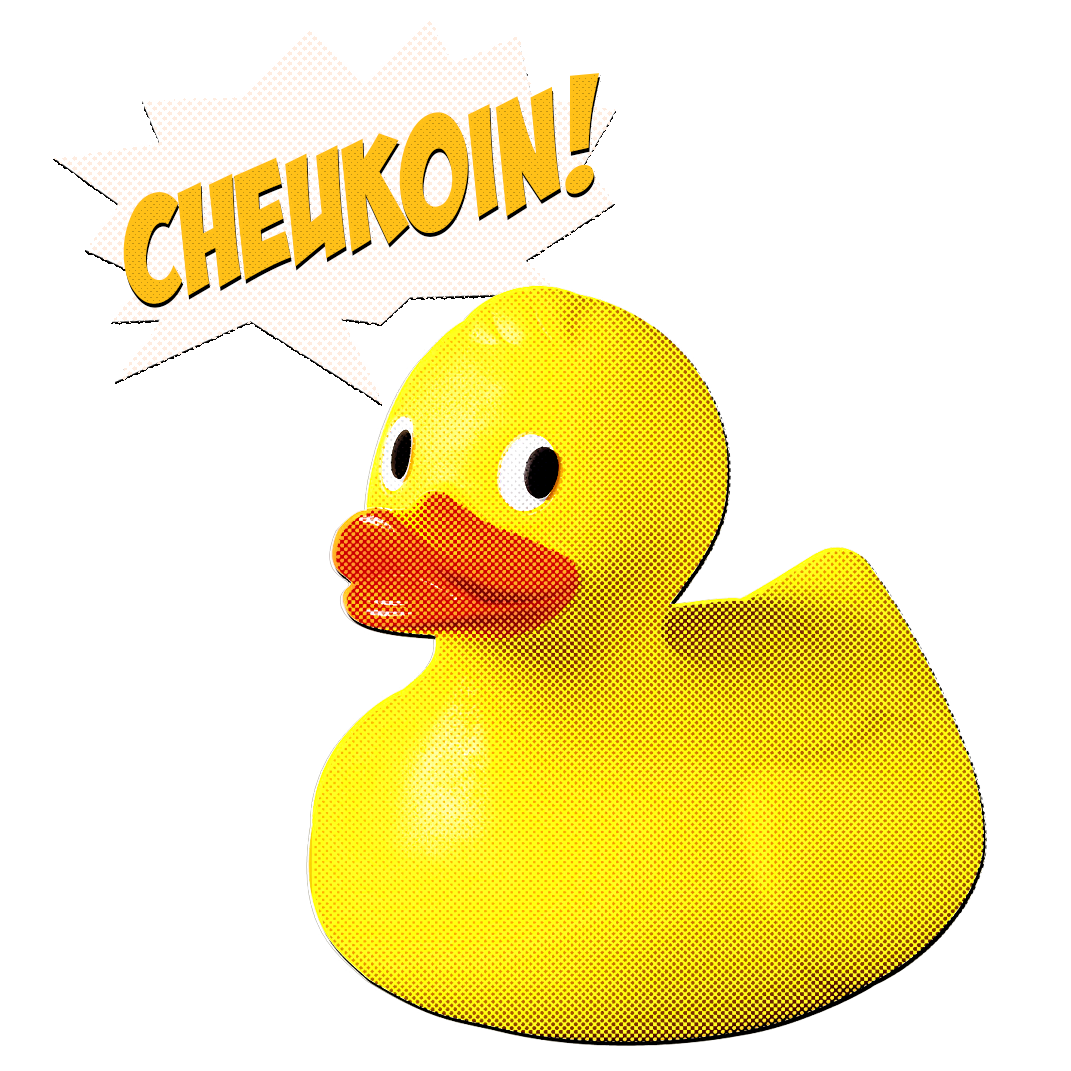
<style>
.page{position:relative;width:1071px;height:1071px;background:#ffffff}
.page>*{position:absolute;margin:0}
.t1{font:146.9px "BadaBoomBB";color:#ffc018;text-transform:uppercase;scale:0.95 1}
</style>
<div class="page">
<p class="t1" style="left:123px;top:73px;width:476px;height:231px;rotate:-15deg">CHEUKOIN!</p>
<p class="t1" style="left:124px;top:77px;width:476px;height:231px;rotate:-15deg">CHEUKOIN!</p>
</div>
